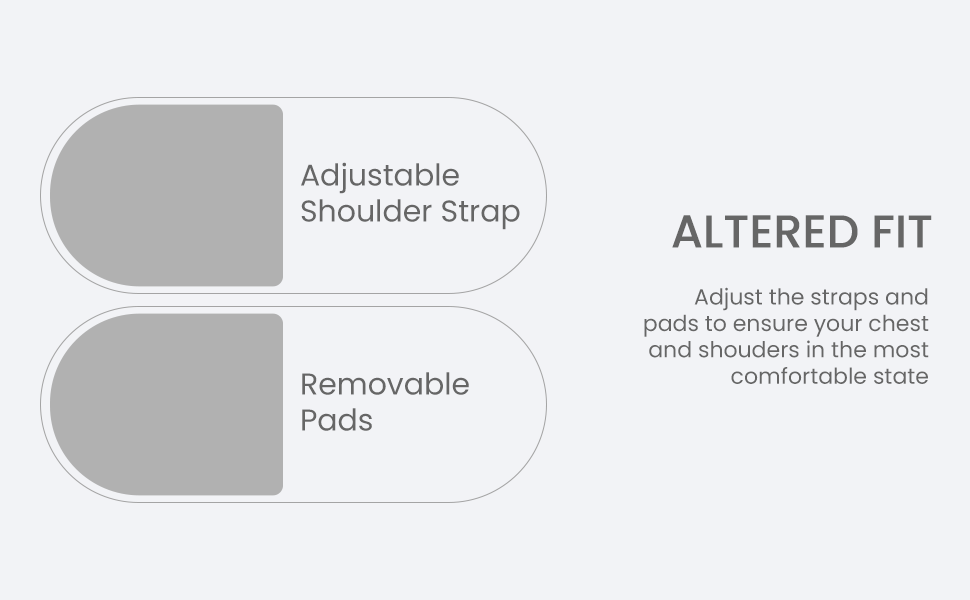
<style>
.page{position:relative;width:970px;height:600px;background:#f2f3f6}
.page>*{position:absolute;margin:0}
.t1{font:30px "Poppins-Regular";color:#666666}
.t2{font:46px "Poppins-Medium";color:#666666}
.t3{font:22px "Poppins-Regular";color:#666666}
</style>
<div class="page">
<p class="t1" style="left:301px;top:162px;width:219px;height:68px">Adjustable<br>Shoulder Strap</p>
<p class="t2" style="left:672px;top:215px;width:260px;height:33px">ALTERED FIT</p>
<p class="t3" style="left:644px;top:287px;width:285px;height:97px;text-align:right">Adjust the straps and<br>pads to ensure your chest<br>and shouders in the most<br>comfortable state</p>
<p class="t1" style="left:302px;top:372px;width:167px;height:59px">Removable<br>Pads</p>
</div>
